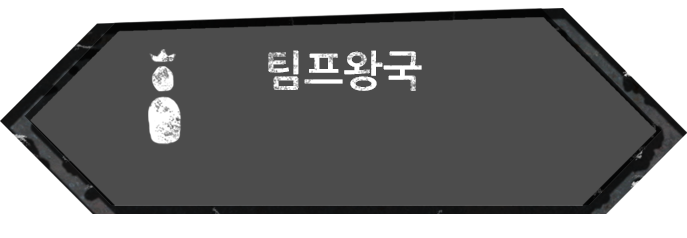
<style>
.page{position:relative;width:687px;height:238px;background:#4c4c4c}
.page>*{position:absolute;margin:0}
.t1{font:42px "NanumGothicBold";color:#ffffff}
</style>
<div class="page">
<p class="t1" style="left:268px;top:50px;width:154px;height:41px">팀프왕국</p>
</div>
